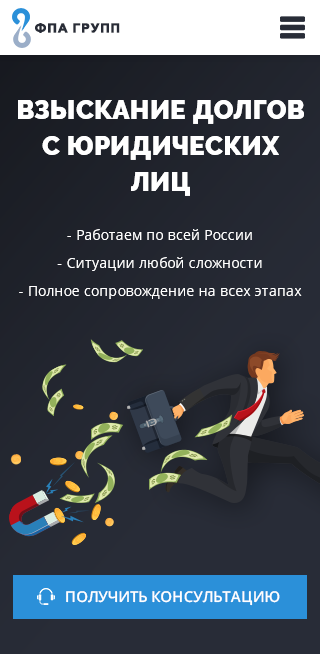
<style>
.page{position:relative;width:320px;height:654px}
.page>*{position:absolute;margin:0}
.t1{font:12.9px "Geometria-ExtraBold";letter-spacing:0.05em;color:#282c37;text-transform:uppercase}
.t2{font:26px/36px "Raleway-Black";letter-spacing:0.01em;color:#ffffff}
.t3{font:14px/28px "OpenSans";letter-spacing:0.01em;color:#ffffff}
.t4{font:15px "OpenSans-Semibold";letter-spacing:0.01em;color:#ffffff;text-transform:uppercase}
</style>
<div class="page">
<p class="t1" style="left:35px;top:23px;width:85px;height:10px">ФПА групп</p>
<p class="t2" style="left:18px;top:100px;width:286px;height:96px;text-align:center">ВЗЫСКАНИЕ ДОЛГОВ<br>С ЮРИДИЧЕСКИХ ЛИЦ</p>
<p class="t3" style="left:19px;top:229px;width:283px;height:70px;text-align:center">- Работаем по всей России<br>- Ситуации любой сложности<br>- Полное сопровождение на всех этапах</p>
<p class="t4" style="left:66px;top:591px;width:214px;height:15px">Получить консультацию</p>
</div>
